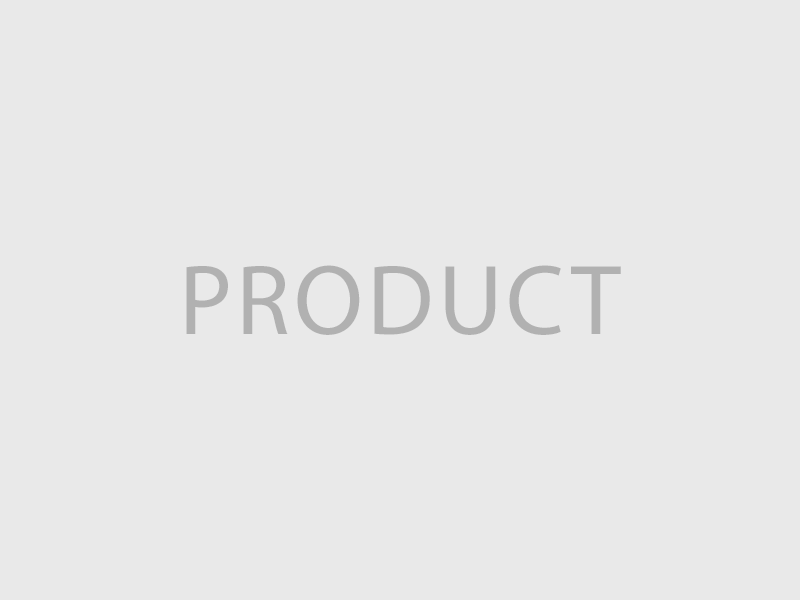
<style>
.page{position:relative;width:800px;height:600px;background:#e9e9e9}
.page>*{position:absolute;margin:0}
.t1{font:100px "MyriadPro-Regular";letter-spacing:0.04em;color:#b1b1b1;text-transform:uppercase}
</style>
<div class="page">
<p class="t1" style="left:186px;top:265px;width:435px;height:70px">product</p>
</div>
